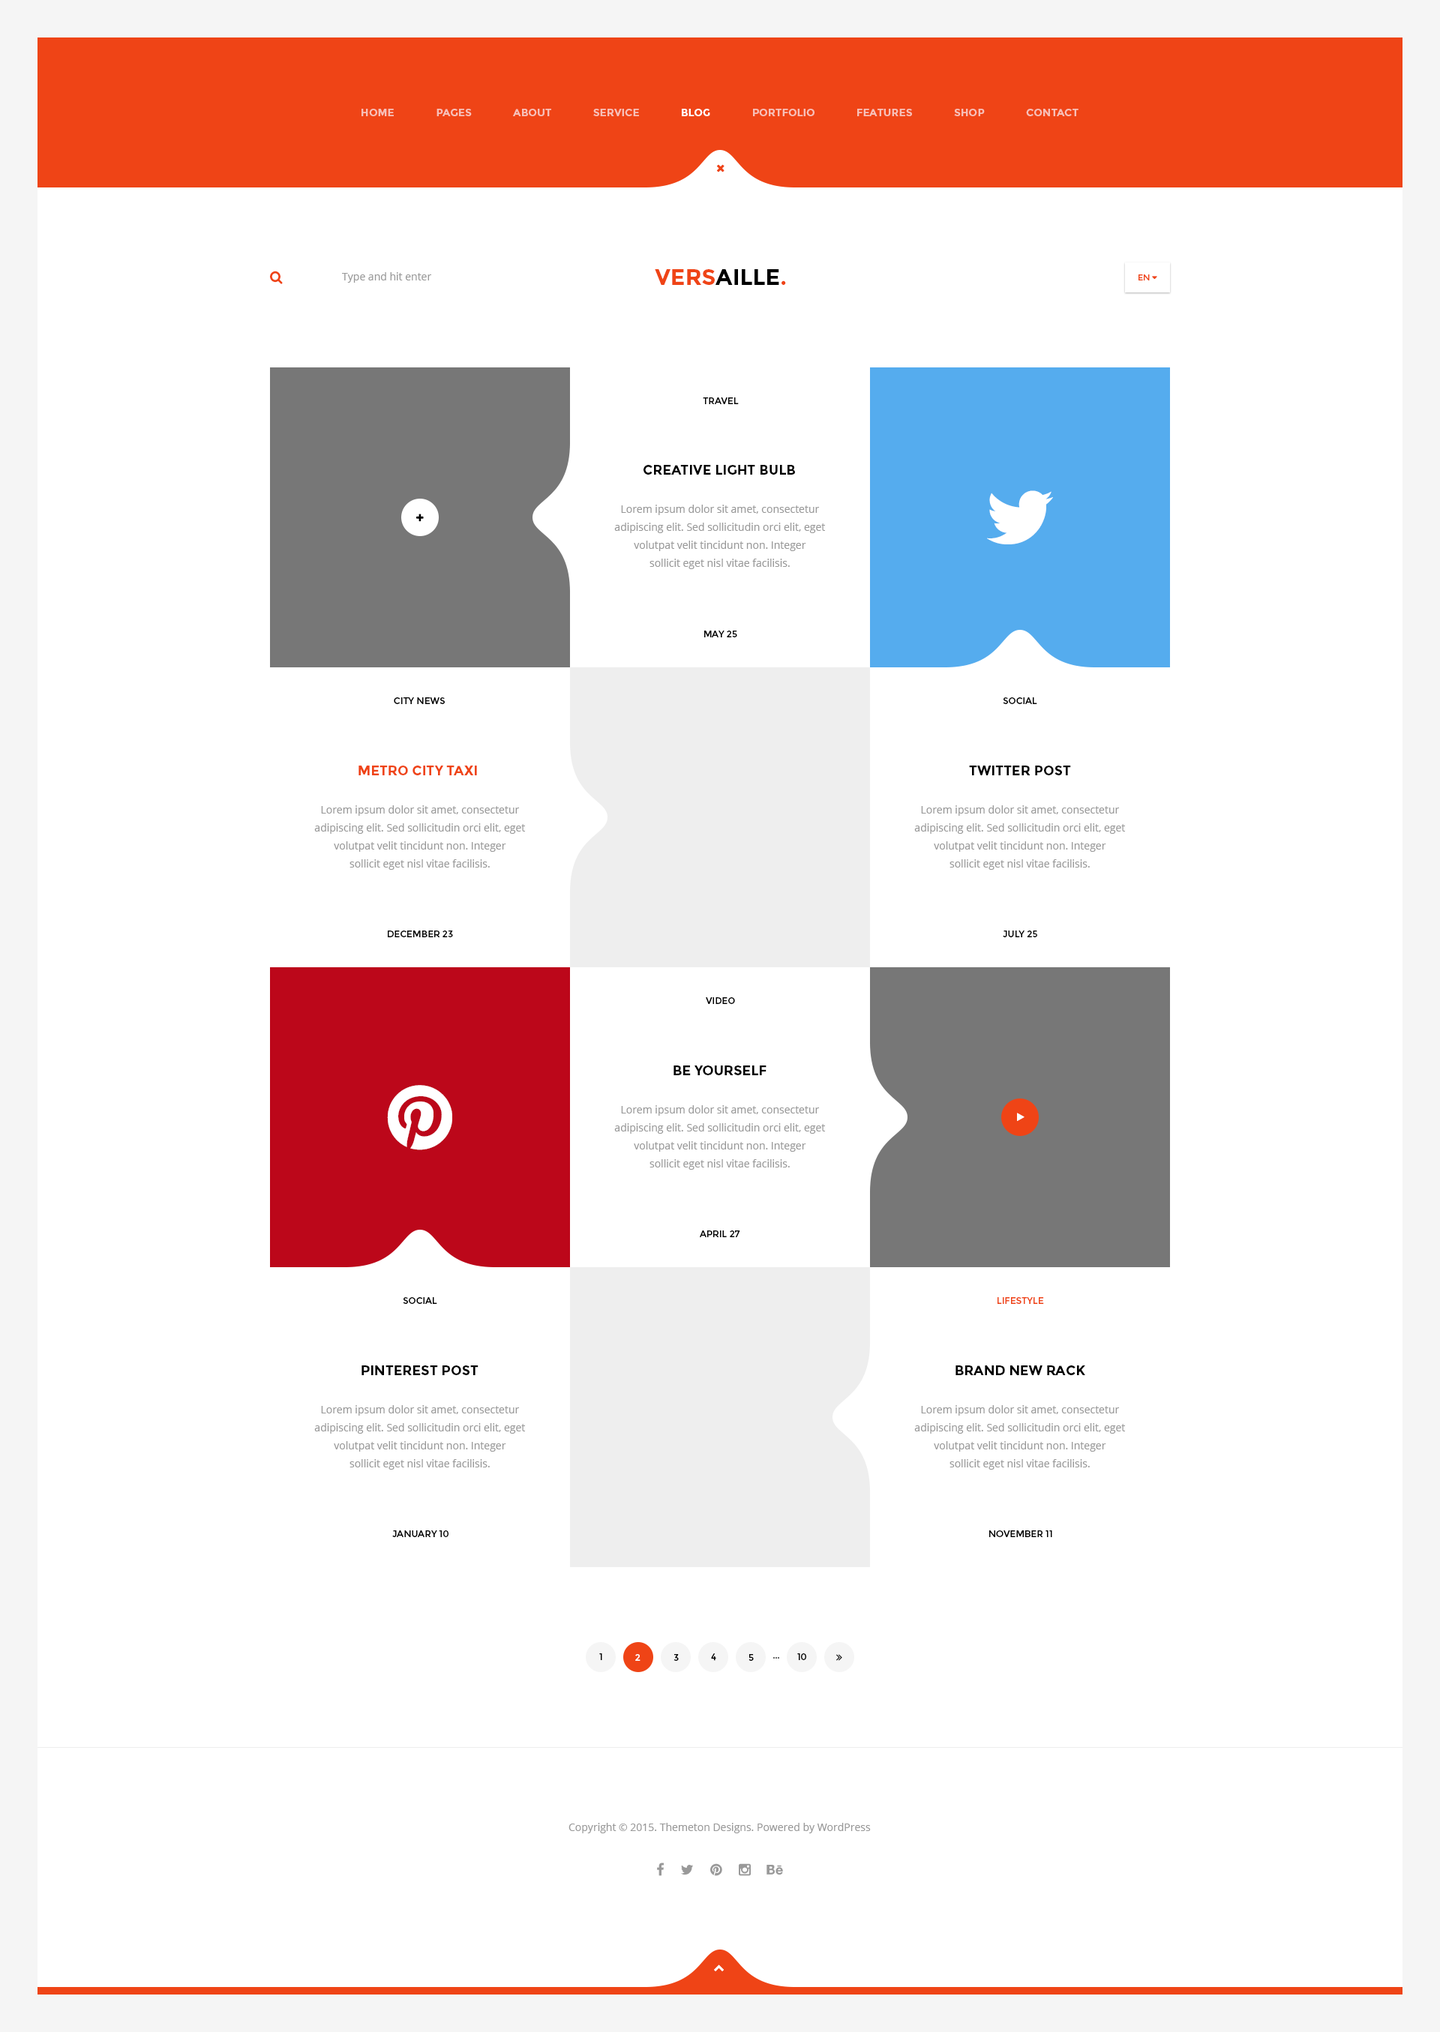
<style>
.page{position:relative;width:1440px;height:2032px;background:#ffffff}
.page>*{position:absolute;margin:0}
.t1{font:10.5px "Montserrat-Bold";color:#f7c0b7}
.t2{font:10.5px "Montserrat-Bold";color:#ffffff}
.t3{font:22.5px "Montserrat-Bold";color:#000000}
.t4{font:22.5px "Montserrat-Bold";color:#ef4416}
.t5{font:10.5px "OpenSans";color:#999999}
.t6{font:9px "Montserrat-Regular";color:#000000}
.t7{font:13.5px "Montserrat-Bold";color:#000000}
.t8{font:10.5px/18px "OpenSans";color:#999999}
.t9{font:13.5px "Montserrat-Bold";color:#ef4416}
.t10{font:9px "Montserrat-Regular";color:#ef4416}
.t11{font:9px "Montserrat-Regular";color:#ffffff}
.t12{font:9px "Montserrat-Regular"}
</style>
<div class="page">
<p class="t1" style="left:362px;top:109px;width:716px;height:7px">HOME               PAGES               ABOUT               SERVICE               <span class="t2">BLOG</span>               PORTFOLIO               FEATURES               SHOP               CONTACT</p>
<p class="t3" style="left:655px;top:269px;width:131px;height:16px"><span class="t4">VERS</span>AILLE<span class="t4">.</span></p>
<p class="t5" style="left:342px;top:272px;width:90px;height:11px">Type and hit enter</p>
<p class="t6" style="left:703px;top:398px;width:36px;height:6px">TRAVEL</p>
<p class="t7" style="left:644px;top:465px;width:151px;height:10px">CREATIVE LIGHT BULB</p>
<p class="t8" style="left:614px;top:505px;width:211px;height:64px;text-align:center">Lorem ipsum dolor sit amet, consectetur <br>adipiscing elit. Sed sollicitudin orci elit, eget volutpat velit tincidunt non. Integer <br>sollicit eget nisl vitae facilisis.</p>
<p class="t6" style="left:704px;top:631px;width:33px;height:7px">MAY 25</p>
<p class="t6" style="left:394px;top:698px;width:51px;height:6px">CITY NEWS</p>
<p class="t6" style="left:1003px;top:698px;width:34px;height:6px">SOCIAL</p>
<p class="t9" style="left:358px;top:766px;width:119px;height:10px">METRO CITY TAXI</p>
<p class="t7" style="left:969px;top:766px;width:102px;height:10px">TWITTER POST</p>
<p class="t8" style="left:314px;top:806px;width:211px;height:64px;text-align:center">Lorem ipsum dolor sit amet, consectetur <br>adipiscing elit. Sed sollicitudin orci elit, eget volutpat velit tincidunt non. Integer <br>sollicit eget nisl vitae facilisis.</p>
<p class="t8" style="left:914px;top:806px;width:211px;height:64px;text-align:center">Lorem ipsum dolor sit amet, consectetur <br>adipiscing elit. Sed sollicitudin orci elit, eget volutpat velit tincidunt non. Integer <br>sollicit eget nisl vitae facilisis.</p>
<p class="t6" style="left:388px;top:931px;width:65px;height:7px">DECEMBER 23</p>
<p class="t6" style="left:1003px;top:931px;width:34px;height:7px">JULY 25</p>
<p class="t6" style="left:706px;top:998px;width:29px;height:6px">VIDEO</p>
<p class="t7" style="left:674px;top:1066px;width:92px;height:10px">BE YOURSELF</p>
<p class="t8" style="left:614px;top:1106px;width:211px;height:64px;text-align:center">Lorem ipsum dolor sit amet, consectetur <br>adipiscing elit. Sed sollicitudin orci elit, eget volutpat velit tincidunt non. Integer <br>sollicit eget nisl vitae facilisis.</p>
<p class="t6" style="left:700px;top:1231px;width:40px;height:7px">APRIL 27</p>
<p class="t6" style="left:403px;top:1298px;width:34px;height:6px">SOCIAL</p>
<p class="t10" style="left:998px;top:1298px;width:46px;height:6px">LIFESTYLE</p>
<p class="t7" style="left:362px;top:1366px;width:116px;height:10px">PINTEREST POST</p>
<p class="t7" style="left:956px;top:1366px;width:129px;height:10px">BRAND NEW RACK</p>
<p class="t8" style="left:314px;top:1406px;width:211px;height:64px;text-align:center">Lorem ipsum dolor sit amet, consectetur <br>adipiscing elit. Sed sollicitudin orci elit, eget volutpat velit tincidunt non. Integer <br>sollicit eget nisl vitae facilisis.</p>
<p class="t8" style="left:914px;top:1406px;width:211px;height:64px;text-align:center">Lorem ipsum dolor sit amet, consectetur <br>adipiscing elit. Sed sollicitudin orci elit, eget volutpat velit tincidunt non. Integer <br>sollicit eget nisl vitae facilisis.</p>
<p class="t6" style="left:392px;top:1531px;width:56px;height:7px">JANUARY 10</p>
<p class="t6" style="left:989px;top:1531px;width:63px;height:7px">NOVEMBER 11</p>
<p class="t6" style="left:599px;top:1654px;width:3px;height:6px">1</p>
<p class="t11" style="left:635px;top:1654px;width:5px;height:7px">2</p>
<p class="t6" style="left:674px;top:1654px;width:5px;height:7px">3</p>
<p class="t6" style="left:711px;top:1654px;width:5px;height:7px">4</p>
<p class="t6" style="left:748px;top:1654px;width:6px;height:7px">5</p>
<p class="t12" style="left:773px;top:1658px;width:6px;height:1px">...</p>
<p class="t6" style="left:797px;top:1654px;width:9px;height:6px">10</p>
<p class="t5" style="left:568px;top:1823px;width:303px;height:11px">Copyright © 2015. Themeton Designs. Powered by WordPress</p>
</div>
